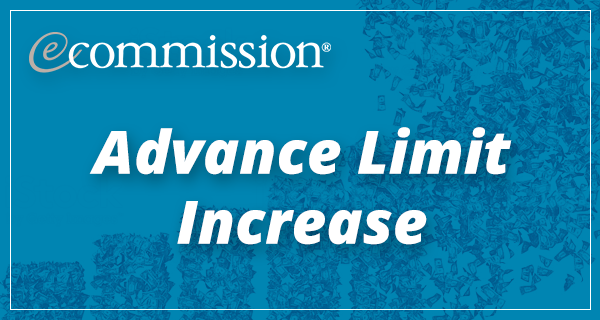
<style>
.page{position:relative;width:600px;height:320px;background:#0085b2}
.page>*{position:absolute;margin:0}
.t1{font:60px/70px "OpenSans-ExtraboldItalic";color:#ffffff}
</style>
<div class="page">
<p class="t1" style="left:89px;top:127px;width:423px;height:118px;text-align:center">Advance Limit<br>Increase</p>
</div>
